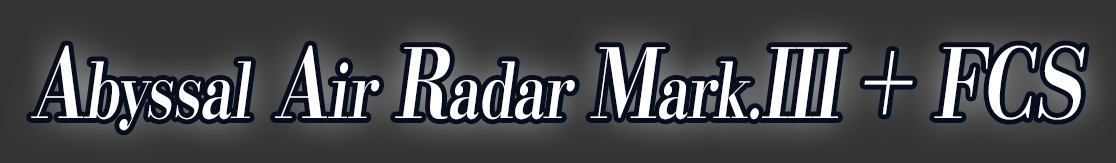
<style>
.page{position:relative;width:1116px;height:163px}
.page>*{position:absolute;margin:0}
.t1{font:96px "KochoStd-Heavy";letter-spacing:-0.01em;color:#ffffff;font-style:italic;scale:0.75 1}
.t2{font:76.8px "KochoStd-Heavy";letter-spacing:-0.01em;color:#ffffff;font-style:italic;scale:0.75 1}
</style>
<div class="page">
<p class="t1" style="left:31px;top:45px;width:1054px;height:86px">A<span class="t2">byssal</span> A<span class="t2">ir </span>R<span class="t2">adar </span>M<span class="t2">ark.</span>III + FCS</p>
</div>
